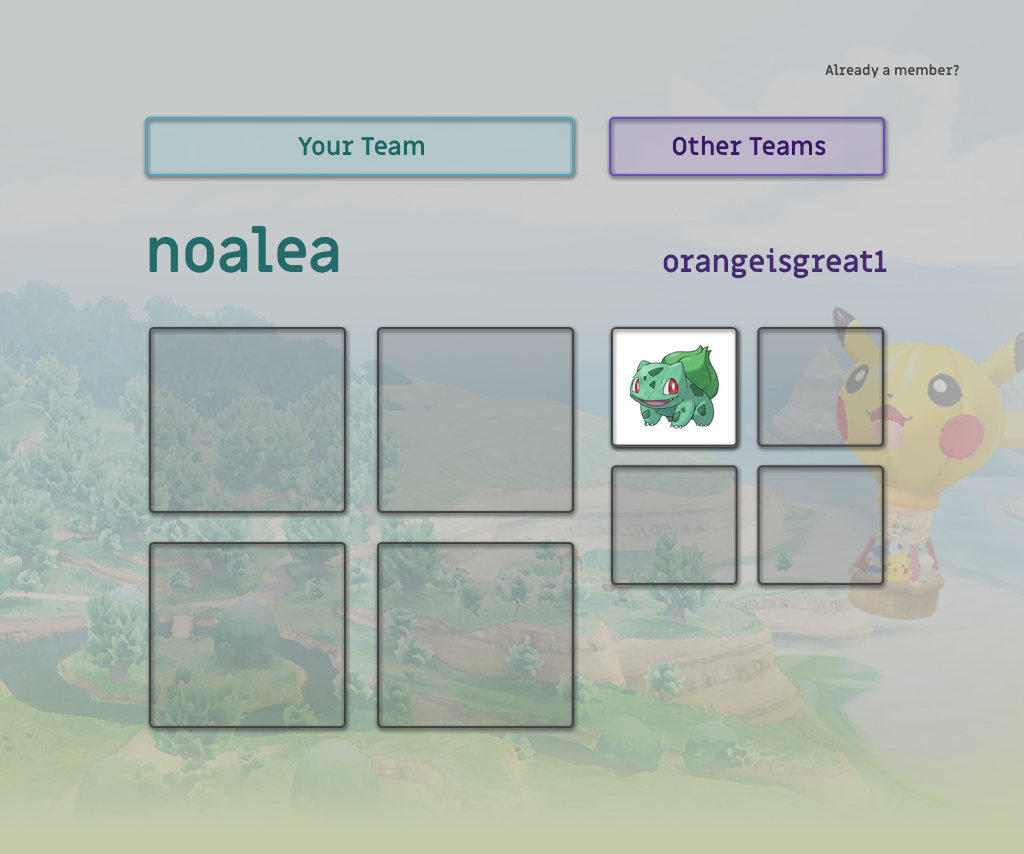
<style>
.page{position:relative;width:1024px;height:854px}
.page>*{position:absolute;margin:0}
.t1{font:14px "MiriamLibre-Bold";color:#454444}
.t2{font:25px "MiriamLibre-Bold";color:#196a67}
.t3{font:25px "MiriamLibre-Bold";color:#38196a}
.t4{font:60px "MiriamLibre-Bold";color:#256b69}
.t5{font:30px "MiriamLibre-Bold";color:#462b71}
</style>
<div class="page">
<p class="t1" style="left:825px;top:64px;width:134px;height:14px">Already a member?</p>
<p class="t2" style="left:298px;top:137px;width:126px;height:19px">Your Team</p>
<p class="t3" style="left:673px;top:135px;width:153px;height:21px">Other Teams</p>
<p class="t4" style="left:149px;top:226px;width:190px;height:47px">noalea</p>
<p class="t5" style="left:663px;top:248px;width:224px;height:31px">orangeisgreat1</p>
</div>
